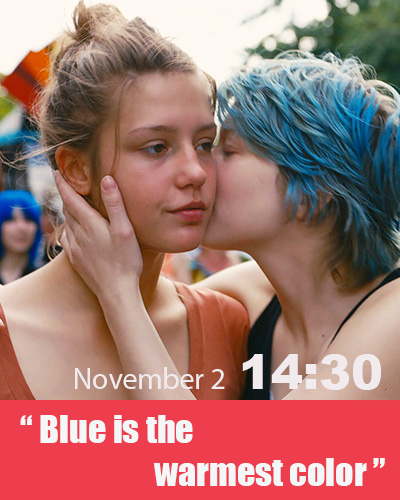
<style>
.page{position:relative;width:400px;height:500px}
.page>*{position:absolute;margin:0}
.t1{font:30px "MyriadPro-Regular";color:#f1ebee}
.t2{font:48px "Arial-Black";color:#f1ebee}
.t3{font:36px "Impact";color:#f3f7f7}
</style>
<div class="page">
<p class="t1" style="left:75px;top:354px;width:306px;height:36px">November 2  <span class="t2">14:30</span></p>
<p class="t3" style="left:20px;top:415px;width:365px;height:71px">“ Blue is the <br>                     warmest color ”</p>
</div>
